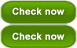
<style>
.page{position:relative;width:77px;height:48px}
.page>*{position:absolute;margin:0}
.t1{font:9.6px "Arial-BoldMT";color:#ffffff;font-weight:bold}
</style>
<div class="page">
<p class="t1" style="left:12px;top:7px;width:53px;height:8px">Check now</p>
<p class="t1" style="left:12px;top:32px;width:53px;height:8px">Check now</p>
</div>
